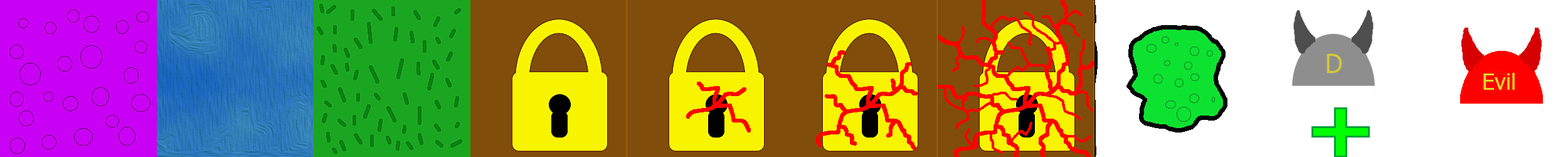
<style>
.page{position:relative;width:1568px;height:157px;background:#ffffff}
.page>*{position:absolute;margin:0}
.t1{font:22.6px "Tahoma";color:#dcdc29}
</style>
<div class="page">
<p class="t1" style="left:1483px;top:73px;width:32px;height:17px">Evil</p>
</div>
